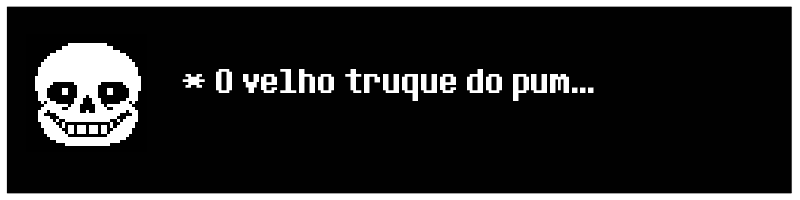
<style>
.page{position:relative;width:800px;height:200px;background:#010101}
.page>*{position:absolute;margin:0}
.t1{font:36px "DeterminationSans";color:#ffffff}
</style>
<div class="page">
<p class="t1" style="left:182px;top:69px;width:412px;height:32px">* O velho truque do pum...</p>
</div>
